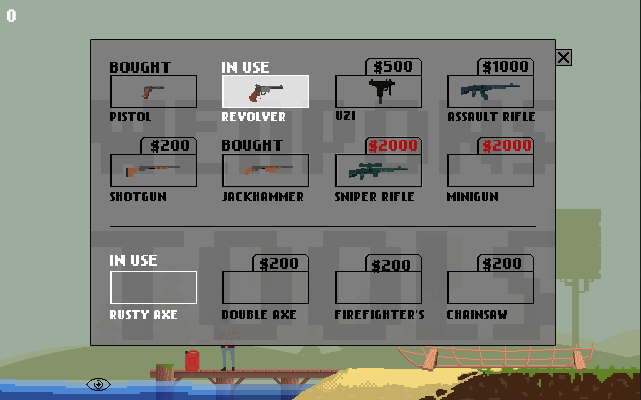
<style>
.page{position:relative;width:641px;height:400px;background:#7d7e7d}
.page>*{position:absolute;margin:0}
.t1{font:13px "NokiaCellphoneFC-Small";color:#010101}
.t2{font:13px "NokiaCellphoneFC-Small";color:#ffffff}
.t3{font:13px "NokiaCellphoneFC-Small";color:#000000}
.t4{font:10px "NokiaCellphoneFC-Small";color:#000000}
.t5{font:10px "NokiaCellphoneFC-Small";color:#ffffff}
.t6{font:13px "NokiaCellphoneFC-Small";color:#b00c0c}
</style>
<div class="page">
<p class="t1" style="left:110px;top:62px;width:61px;height:11px">BOUGHT</p>
<p class="t2" style="left:222px;top:62px;width:47px;height:11px">IN USE</p>
<p class="t3" style="left:374px;top:61px;width:38px;height:13px">$500</p>
<p class="t3" style="left:483px;top:61px;width:45px;height:13px">$1000</p>
<p class="t4" style="left:110px;top:112px;width:41px;height:9px">PISTOL</p>
<p class="t5" style="left:222px;top:112px;width:63px;height:9px">REVOLVER</p>
<p class="t4" style="left:336px;top:111px;width:19px;height:9px">UZI</p>
<p class="t4" style="left:448px;top:112px;width:87px;height:9px">ASSAULT RIFLE</p>
<p class="t3" style="left:151px;top:140px;width:38px;height:13px">$200</p>
<p class="t1" style="left:222px;top:140px;width:61px;height:11px">BOUGHT</p>
<p class="t6" style="left:369px;top:140px;width:48px;height:13px">$2000</p>
<p class="t6" style="left:483px;top:140px;width:48px;height:13px">$2000</p>
<p class="t4" style="left:110px;top:192px;width:56px;height:9px">SHOTGUN</p>
<p class="t4" style="left:222px;top:192px;width:81px;height:9px">JACKHAMMER</p>
<p class="t4" style="left:335px;top:192px;width:79px;height:9px">SNIPER RIFLE</p>
<p class="t4" style="left:447px;top:192px;width:51px;height:9px">MINIGUN</p>
<p class="t2" style="left:110px;top:255px;width:47px;height:11px">IN USE</p>
<p class="t3" style="left:260px;top:258px;width:38px;height:13px">$200</p>
<p class="t3" style="left:372px;top:260px;width:38px;height:13px">$200</p>
<p class="t5" style="left:110px;top:310px;width:67px;height:9px">RUSTY AXE</p>
<p class="t4" style="left:222px;top:310px;width:74px;height:9px">DOUBLE AXE</p>
<p class="t4" style="left:335px;top:310px;width:89px;height:9px">FIREFIGHTER’S</p>
<p class="t4" style="left:447px;top:310px;width:60px;height:9px">CHAINSAW</p>
</div>
